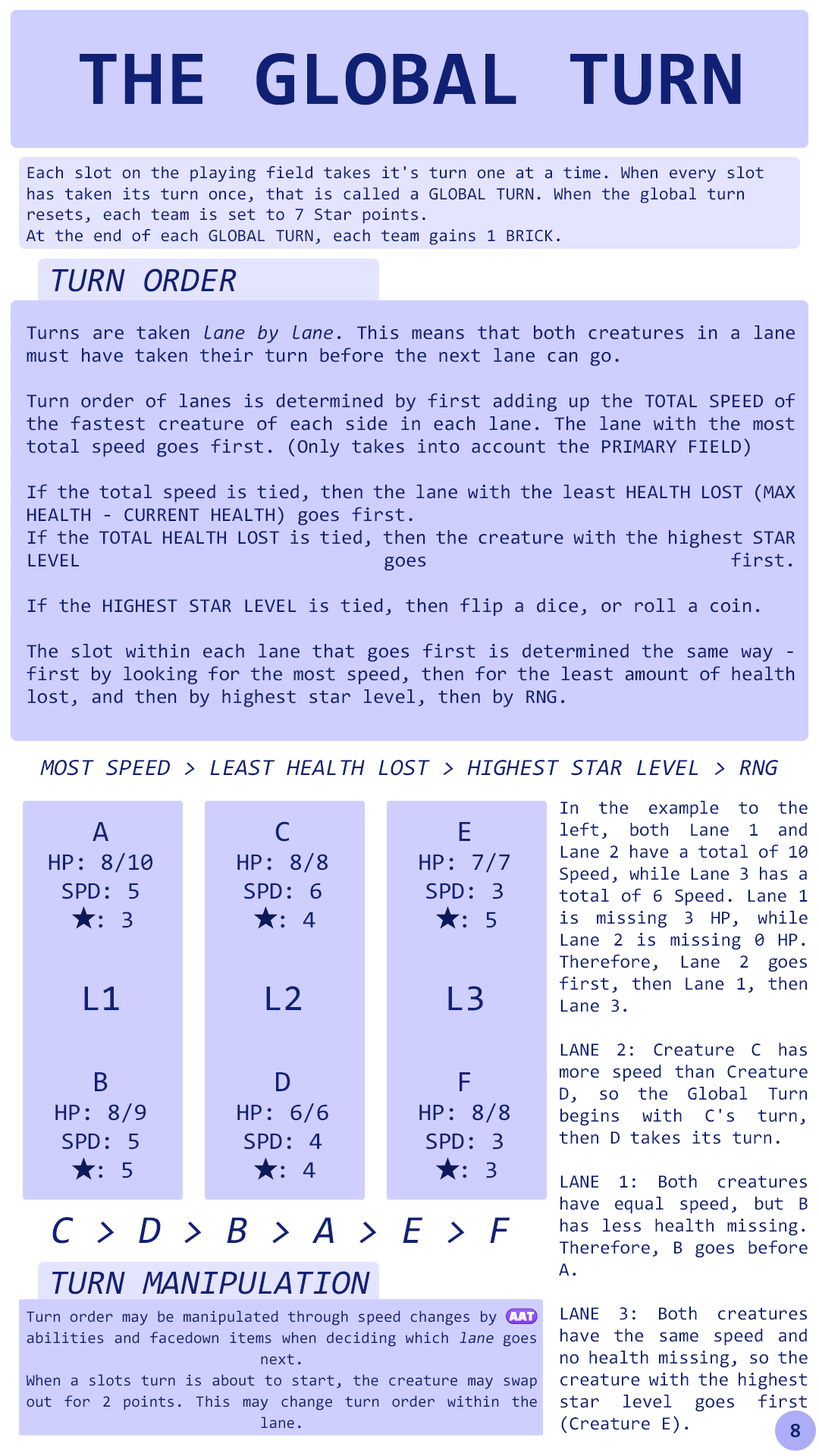
<style>
.page{position:relative;width:819px;height:1456px;background:#cfcfff}
.page>*{position:absolute;margin:0}
.t1{font:78.3px "Consolas-Bold";letter-spacing:0.02em;color:#102175}
.t2{font:17.4px "Consolas";color:#102175}
.t3{font:34.3px "Consolas-Italic";color:#102175}
.t4{font:19.7px/22.7px "Consolas";color:#102175}
.t5{font:19.7px/22.7px "Consolas-Italic";color:#102175}
.t6{font:23.5px "Consolas-Italic";color:#102175}
.t7{font:18.5px/22px "Consolas";color:#102175}
.t8{font:24.1px "Consolas";color:#102175}
.t9{font:29.6px "Consolas";color:#102175}
.t10{font:37px "Consolas";color:#102175}
.t11{font:39.8px "Consolas-Italic";color:#102175}
.t12{font:15.9px/21.2px "Consolas";color:#102175}
.t13{font:15.9px/21.2px "stoogedings-Regular";color:#102175}
.t14{font:15.9px/21.2px "Consolas";color:#102175;font-style:italic}
.t15{font:20.5px "Consolas-Bold";letter-spacing:-0.06em;color:#102175}
</style>
<div class="page">
<p class="t1" style="left:80px;top:53px;width:661px;height:52px">THE GLOBAL TURN</p>
<p class="t2" style="left:26px;top:166px;width:738px;height:79px">Each slot on the playing field takes it's turn one at a time. When every slot has taken its turn once, that is called a GLOBAL TURN. When the global turn resets, each team is set to 7 Star points.<br>At the end of each GLOBAL TURN, each team gains 1 BRICK.</p>
<p class="t3" style="left:52px;top:268px;width:185px;height:24px">TURN ORDER</p>
<p class="t4" style="left:27px;top:325px;width:768px;height:383px;text-align:justify">Turns are taken <span class="t5">lane by lane</span>. This means that both creatures in a lane must have taken their turn before the next lane can go.<br><br>Turn order of lanes is determined by first adding up the TOTAL SPEED of the fastest creature of each side in each lane. The lane with the most total speed goes first. (Only takes into account the PRIMARY FIELD)<br><br>If the total speed is tied, then the lane with the least HEALTH LOST (MAX HEALTH - CURRENT HEALTH) goes first.<br>If the TOTAL HEALTH LOST is tied, then the creature with the highest STAR LEVEL goes first.<br><br>If the HIGHEST STAR LEVEL is tied, then flip a dice, or roll a coin.<br><br>The slot within each lane that goes first is determined the same way - first by looking for the most speed, then for the least amount of health lost, and then by highest star level, then by RNG.</p>
<p class="t6" style="left:40px;top:760px;width:738px;height:16px">MOST SPEED &gt; LEAST HEALTH LOST &gt; HIGHEST STAR LEVEL &gt; RNG</p>
<p class="t7" style="left:559px;top:801px;width:249px;height:633px;text-align:justify">In the example to the left, both Lane 1 and Lane 2 have a total of 10 Speed, while Lane 3 has a total of 6 Speed. Lane 1 is missing 3 HP, while Lane 2 is missing 0 HP. Therefore, Lane 2 goes first, then Lane 1, then Lane 3. <br><br>LANE 2: Creature C has more speed than Creature D, so the Global Turn begins with C's turn, then D takes its turn. <br><br>LANE 1: Both creatures have equal speed, but B has less health missing. Therefore, B goes before A. <br><br>LANE 3: Both creatures have the same speed and no health missing, so the creature with the highest star level goes first (Creature E).</p>
<p class="t8" style="left:237px;top:821px;width:91px;height:107px;text-align:center"><span class="t9">C<br></span>HP: 8/8<br>SPD: 6<br>  : 4</p>
<p class="t8" style="left:49px;top:822px;width:103px;height:106px;text-align:center"><span class="t9">A<br></span>HP: 8/10<br>SPD: 5<br>  : 3</p>
<p class="t8" style="left:419px;top:822px;width:91px;height:106px;text-align:center"><span class="t9">E<br></span>HP: 7/7<br>SPD: 3<br>  : 5</p>
<p class="t10" style="left:84px;top:987px;width:35px;height:23px">L1</p>
<p class="t10" style="left:266px;top:986px;width:35px;height:24px">L2</p>
<p class="t10" style="left:448px;top:986px;width:35px;height:25px">L3</p>
<p class="t8" style="left:55px;top:1072px;width:91px;height:106px;text-align:center"><span class="t9">B<br></span>HP: 8/9<br>SPD: 5<br>  : 5</p>
<p class="t8" style="left:237px;top:1072px;width:91px;height:106px;text-align:center"><span class="t9">D<br></span>HP: 6/6<br>SPD: 4<br>  : 4</p>
<p class="t8" style="left:419px;top:1072px;width:91px;height:106px;text-align:center"><span class="t9">F<br></span>HP: 8/8<br>SPD: 3<br>  : 3</p>
<p class="t11" style="left:52px;top:1217px;width:458px;height:27px">C &gt; D &gt; B &gt; A &gt; E &gt; F</p>
<p class="t3" style="left:52px;top:1271px;width:318px;height:23px">TURN MANIPULATION</p>
<p class="t12" style="left:27px;top:1308px;width:511px;height:121px;text-align:justify">Turn order may be manipulated through speed changes by <span class="t13">(AAT)</span> abilities and facedown items when deciding which <span class="t14">lane</span> goes next.<br>When a slots turn is about to start, the creature may swap out for 2 points. This may change turn order within the lane.</p>
<p class="t15" style="left:790px;top:1423px;width:10px;height:15px">8</p>
</div>
